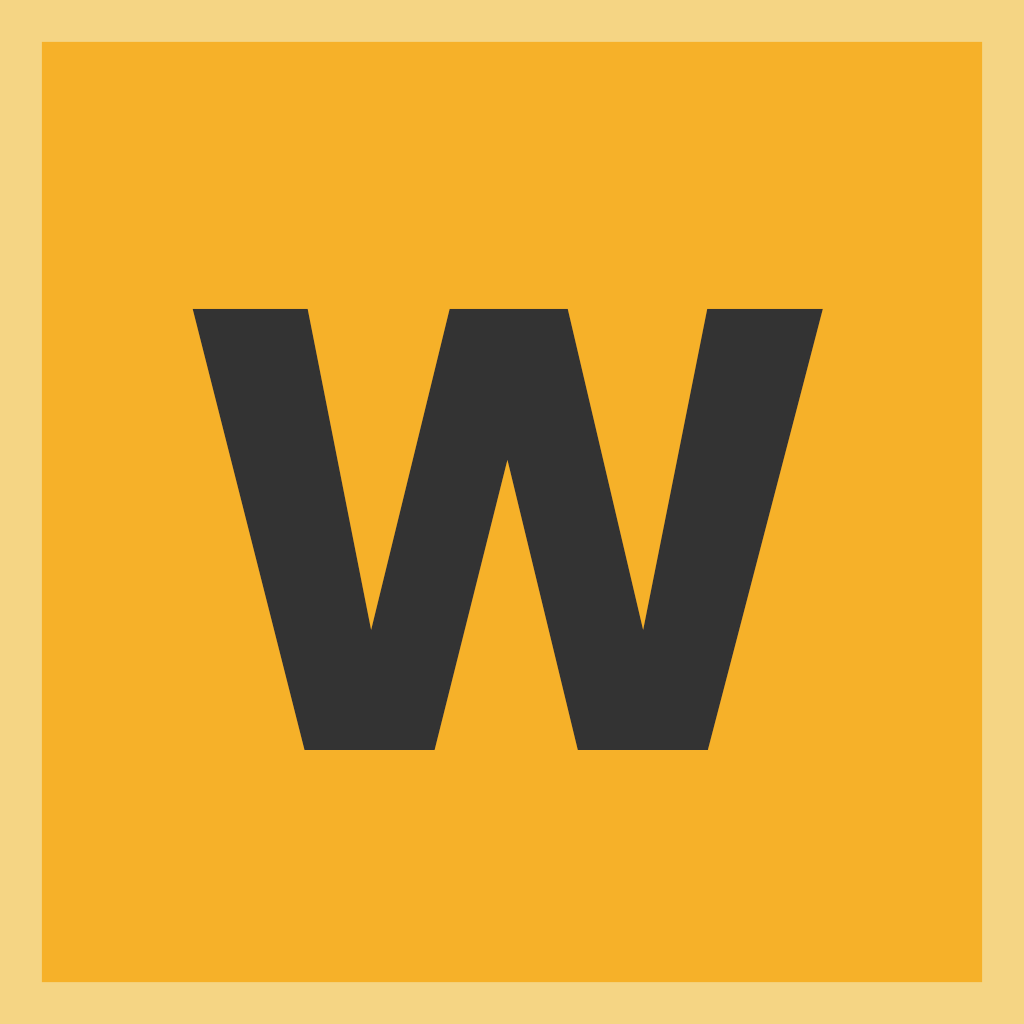
<style>
.page{position:relative;width:1024px;height:1024px;background:#f6b129}
.page>*{position:absolute;margin:0}
.t1{font:628.2px "Poppins-Bold";color:#333333}
</style>
<div class="page">
<p class="t1" style="left:192px;top:308px;width:631px;height:442px">W</p>
</div>
